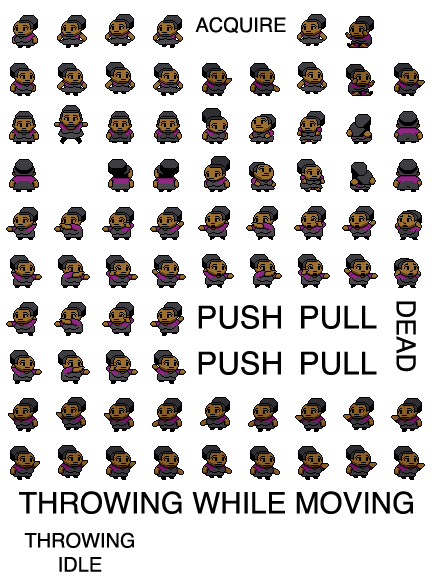
<style>
.page{position:relative;width:432px;height:576px;background:#ffffff}
.page>*{position:absolute;margin:0}
.t1{font:20px "Helvetica";color:#000000}
.t2{font:31.4px "Helvetica";color:#000000}
.t3{font:26.3px "Helvetica";color:#000000}
.t4{font:29.7px "Helvetica";color:#000000}
</style>
<div class="page">
<p class="t1" style="left:195px;top:17px;width:91px;height:17px">ACQUIRE</p>
<p class="t2" style="left:198px;top:305px;width:83px;height:24px">PUSH</p>
<p class="t2" style="left:301px;top:305px;width:76px;height:24px">PULL</p>
<p class="t3" style="left:396px;top:301px;width:20px;height:71px;rotate:90deg">DEAD</p>
<p class="t2" style="left:198px;top:351px;width:83px;height:24px">PUSH</p>
<p class="t2" style="left:301px;top:351px;width:76px;height:24px">PULL</p>
<p class="t4" style="left:19px;top:491px;width:394px;height:23px">THROWING WHILE MOVING</p>
<p class="t1" style="left:24px;top:532px;width:110px;height:40px;text-align:center">THROWING<br>IDLE</p>
</div>
